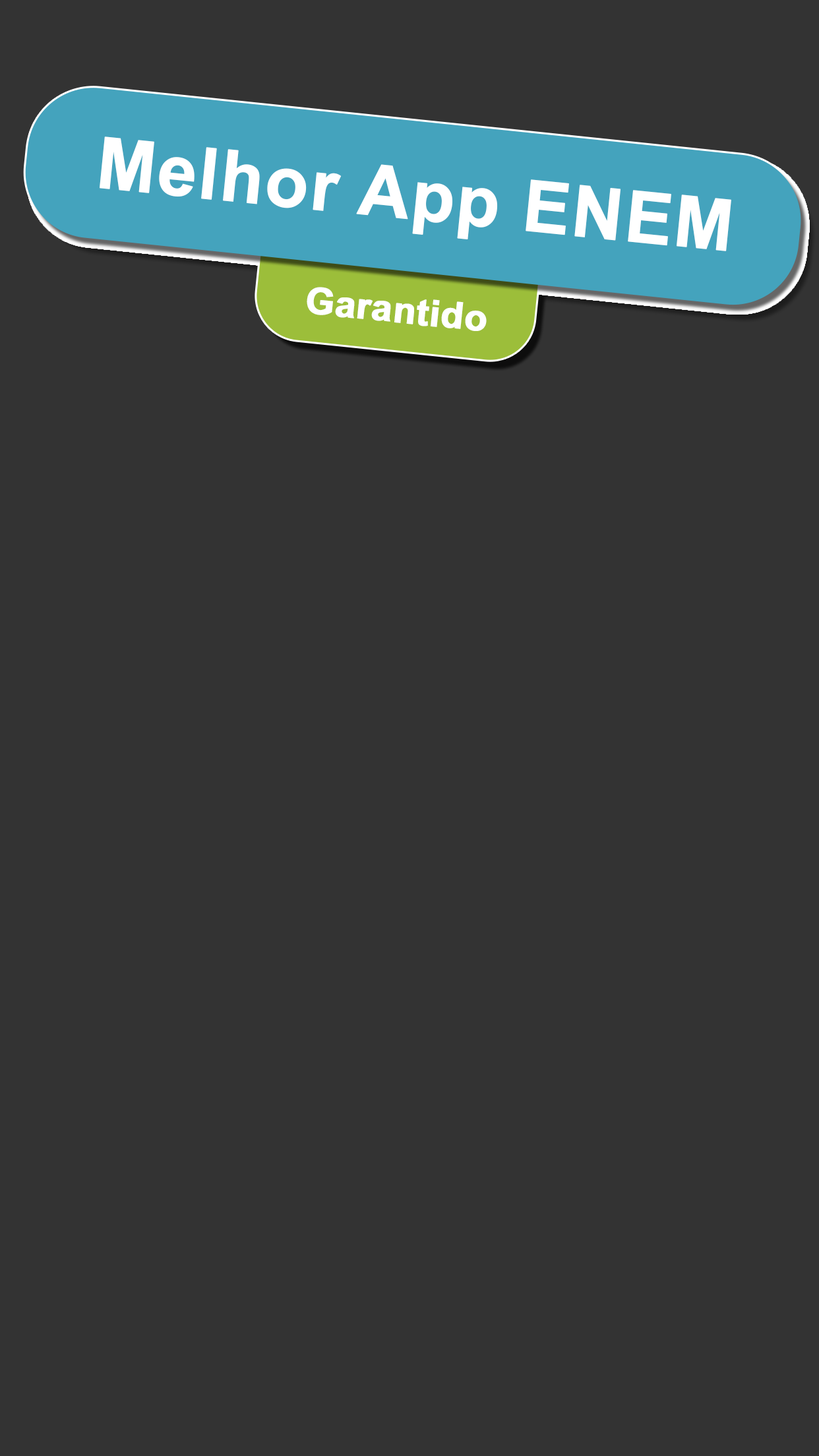
<style>
.page{position:relative;width:819px;height:1456px;background:#333333}
.page>*{position:absolute;margin:0}
.t1{font:71.2px "Arial-BoldMT";color:#ffffff;font-weight:bold}
.t2{font:37px "Arial-BoldMT";color:#ffffff;font-weight:bold}
</style>
<div class="page">
<p class="t1" style="left:100px;top:136px;width:631px;height:115px;rotate:6deg">Melhor App ENEM</p>
<p class="t2" style="left:307px;top:287px;width:180px;height:44px;rotate:6deg">Garantido</p>
</div>
